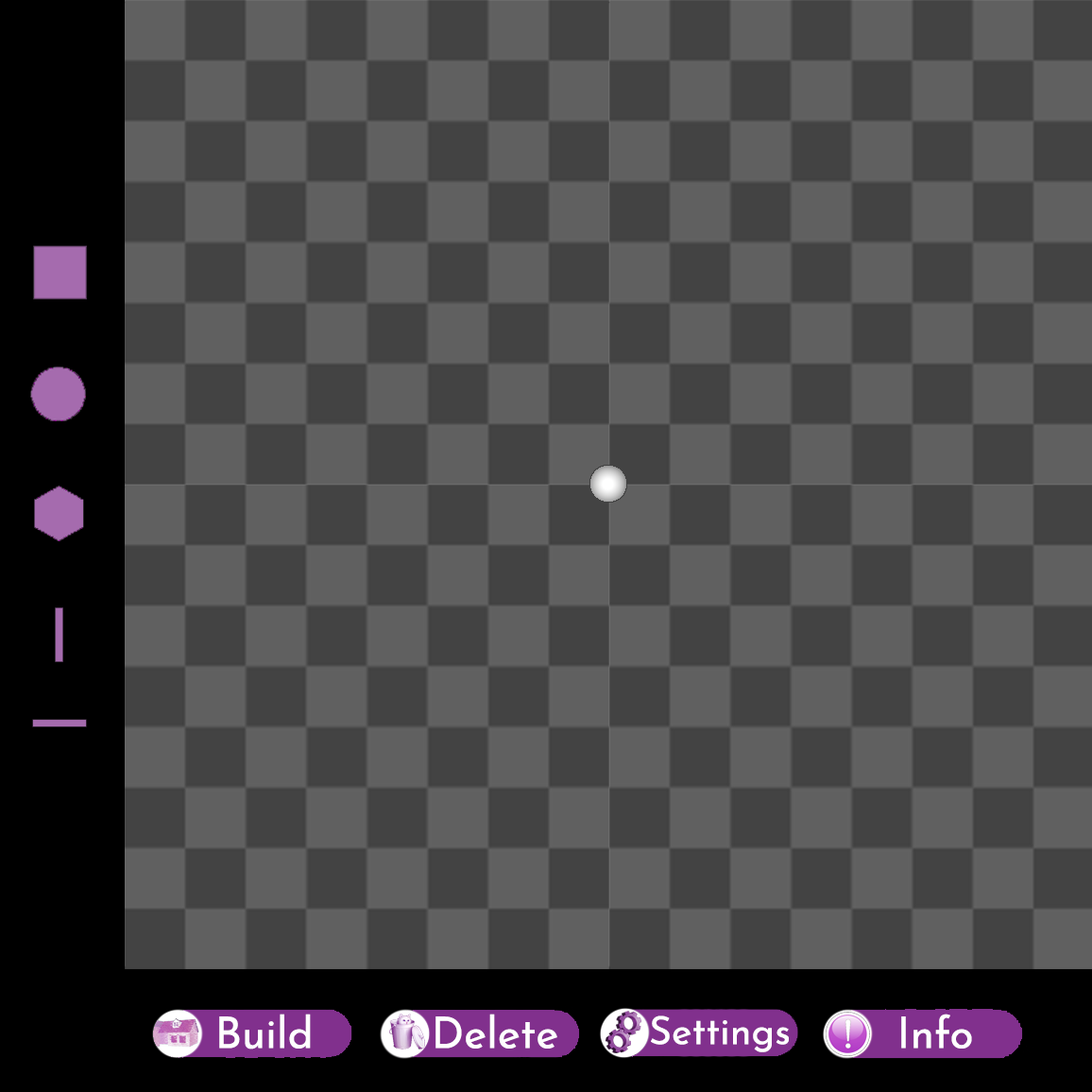
<style>
.page{position:relative;width:1092px;height:1092px;background:#606060}
.page>*{position:absolute;margin:0}
.t1{font:43.5px "JosefinSans-Regular";color:#ffffff}
.t2{font:38.7px "JosefinSans-Regular";color:#ffffff}
</style>
<div class="page">
<p class="t1" style="left:219px;top:1014px;width:92px;height:35px">Build</p>
<p class="t1" style="left:435px;top:1014px;width:122px;height:35px">Delete</p>
<p class="t1" style="left:901px;top:1014px;width:71px;height:35px">Info</p>
<p class="t2" style="left:651px;top:1015px;width:138px;height:37px">Settings</p>
</div>
